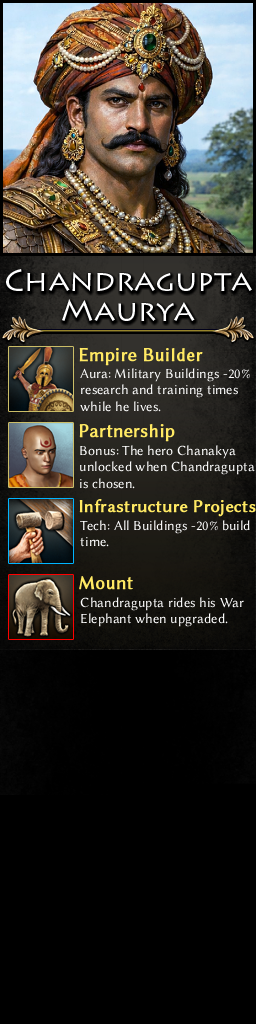
<style>
.page{position:relative;width:256px;height:1024px;background:#000000}
.page>*{position:absolute;margin:0}
.t1{font:30px/30px "LithosPro-Regular";color:#ffffff}
.t2{font:19px "LinBiolinumO";color:#ffe963;font-weight:bold}
.t3{font:14px "LinBiolinumO";color:#ffffff}
.t4{font:18px "LinBiolinumO";color:#ffe963;font-weight:bold}
</style>
<div class="page">
<p class="t1" style="left:6px;top:269px;width:246px;height:52px;text-align:center">Chandragupta<br>Maurya</p>
<p class="t2" style="left:79px;top:347px;width:124px;height:19px">Empire Builder</p>
<p class="t3" style="left:80px;top:368px;width:170px;height:44px">Aura: Military Buildings -20%<br>research and training times <br>while he lives.</p>
<p class="t2" style="left:79px;top:424px;width:96px;height:18px">Partnership</p>
<p class="t3" style="left:80px;top:445px;width:175px;height:44px">Bonus: The hero Chanakya <br>unlocked when Chandragupta<br>is chosen.</p>
<p class="t4" style="left:79px;top:499px;width:177px;height:18px">Infrastructure Projects</p>
<p class="t3" style="left:80px;top:520px;width:170px;height:27px">Tech: All Buildings -20% build <br>time.</p>
<p class="t2" style="left:79px;top:576px;width:54px;height:14px">Mount</p>
<p class="t3" style="left:80px;top:597px;width:164px;height:30px">Chandragupta rides his War<br>Elephant when upgraded.</p>
</div>
